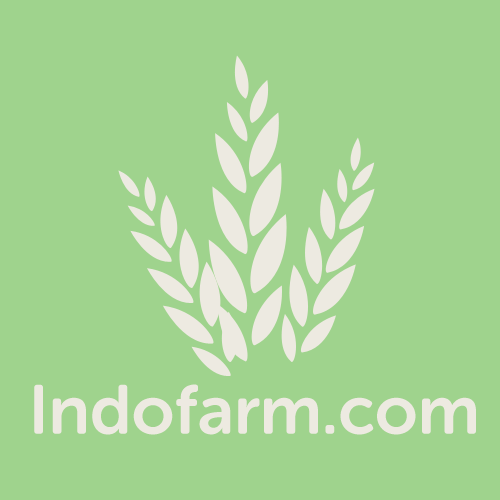
<style>
.page{position:relative;width:500px;height:500px;background:#9fd38d}
.page>*{position:absolute;margin:0}
.t1{font:69px "MuseoSansRounded-Bold";color:#edeae1}
</style>
<div class="page">
<p class="t1" style="left:34px;top:384px;width:442px;height:51px">Indofarm.com</p>
</div>
